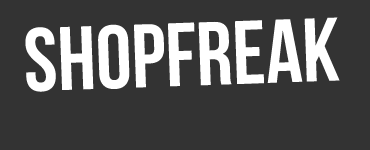
<style>
.page{position:relative;width:370px;height:150px;background:#333333}
.page>*{position:absolute;margin:0}
.t1{font:90px "BebasNeue";color:#ffffff}
</style>
<div class="page">
<p class="t1" style="left:25px;top:17px;width:315px;height:75px;rotate:-2deg">ShopFreak</p>
</div>
